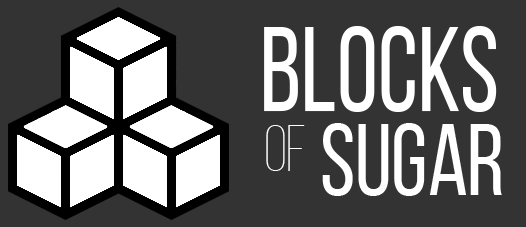
<style>
.page{position:relative;width:526px;height:227px;background:#333333}
.page>*{position:absolute;margin:0}
.t1{font:120.4px "BebasNeueRegular";color:#ffffff;scale:0.88 1}
.t2{font:65.6px "BebasNeueLight";color:#ffffff;scale:0.92 1}
.t3{font:101.2px "BebasNeueRegular";color:#ffffff;scale:0.94 1}
</style>
<div class="page">
<p class="t1" style="left:264px;top:26px;width:233px;height:86px">BLOCKS</p>
<p class="t2" style="left:266px;top:125px;width:39px;height:46px">OF</p>
<p class="t3" style="left:322px;top:123px;width:180px;height:73px">SUGAR</p>
</div>
